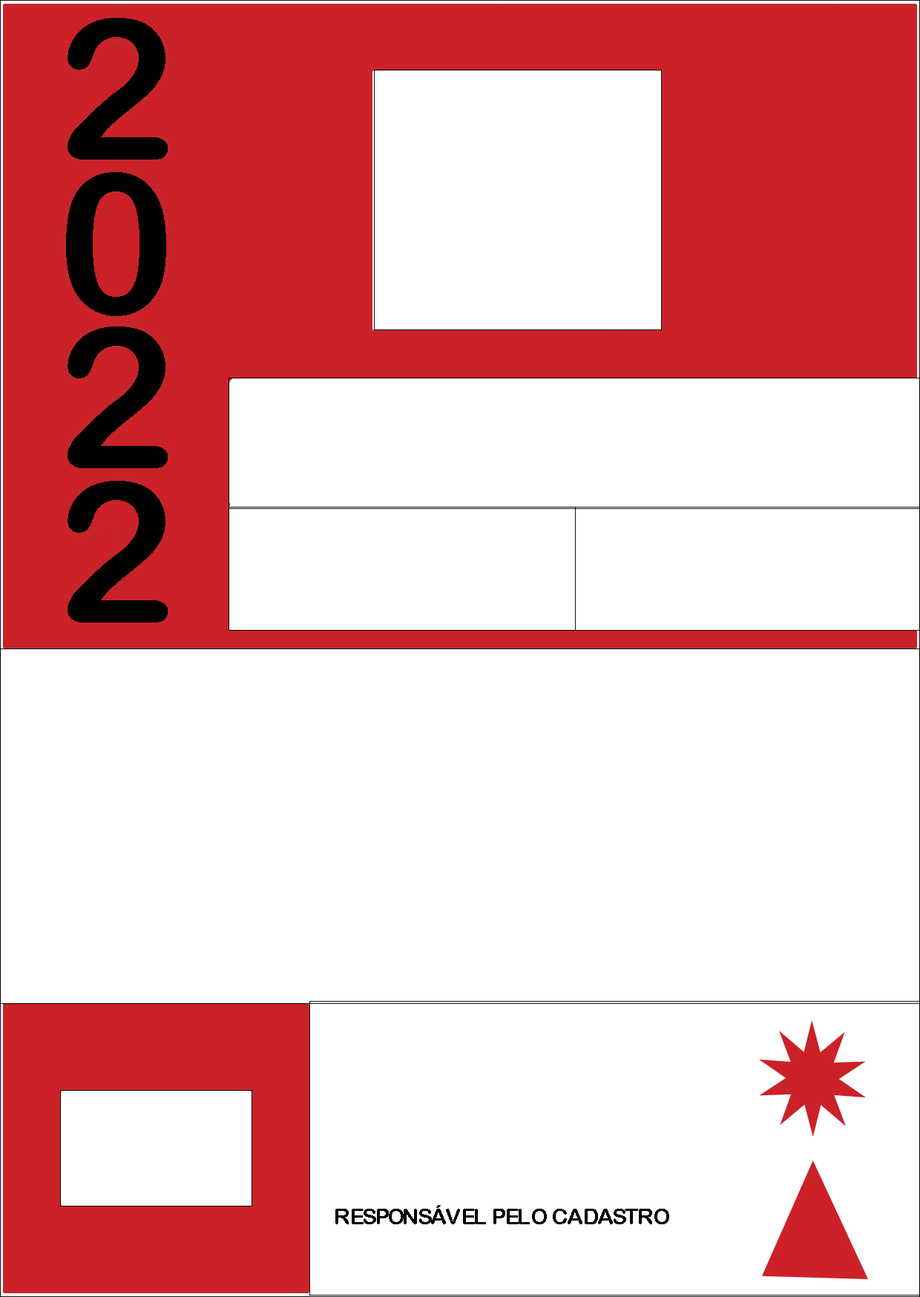
<style>
.page{position:relative;width:920px;height:1297px;background:#ffffff}
.page>*{position:absolute;margin:0}
.t1{font:196.3px/154.2px "ArialRoundedMTBold";letter-spacing:-0.06em;color:#000100}
.t2{font:21.6px "ArialRoundedMTBold";letter-spacing:-0.04em;color:#000100}
.t3{font:21.6px "ArialRoundedMTBold";letter-spacing:-0.018em;color:#000100}
</style>
<div class="page">
<p class="t1" style="left:66px;top:18px;width:102px;height:604px;text-align:justify">2<br>0<br>2<br>2</p>
<p class="t2" style="left:335px;top:1205px;width:334px;height:19px">RESPONSÁVE<span class="t3">L PELO CA</span>DASTRO</p>
</div>
